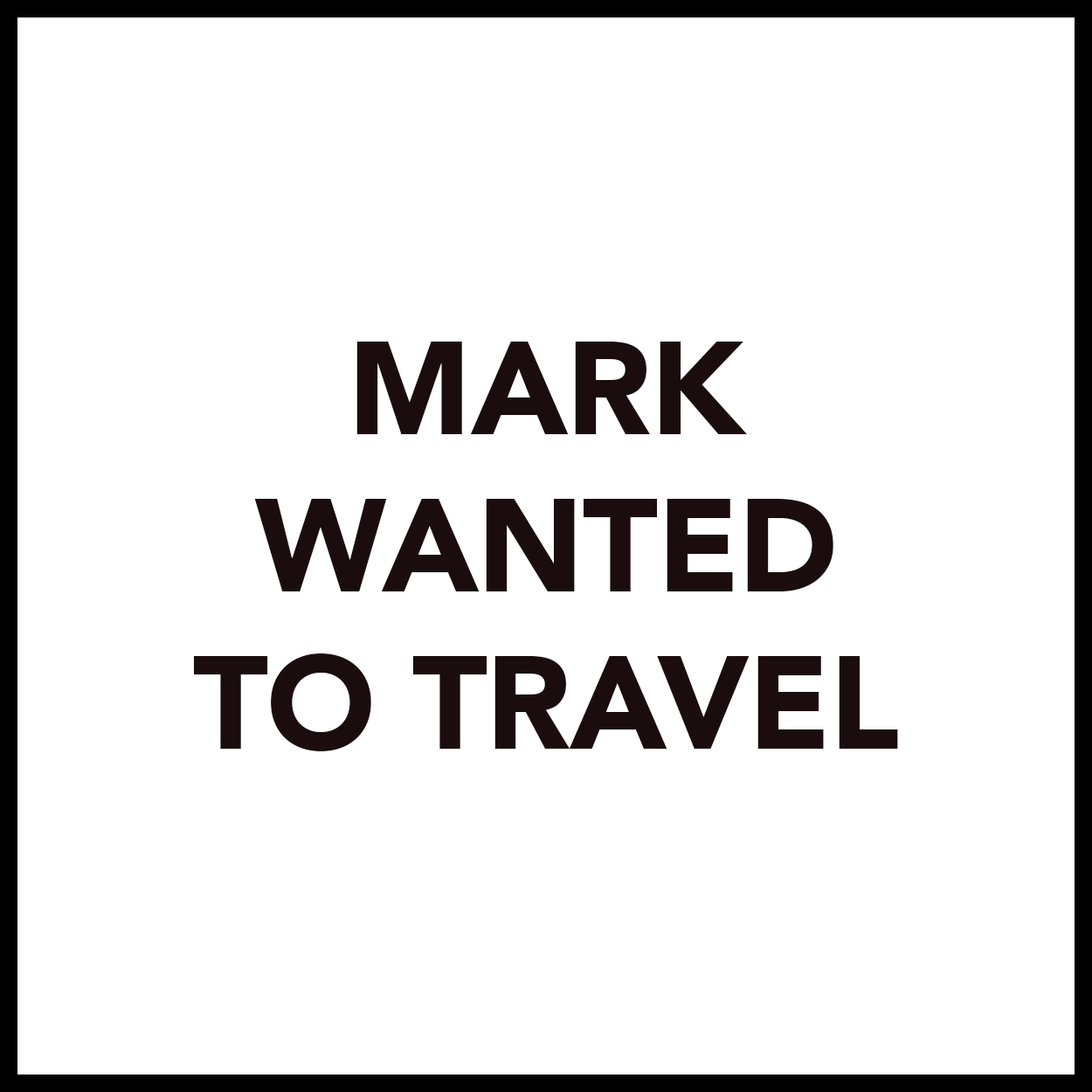
<style>
.page{position:relative;width:1092px;height:1092px;background:#ffffff}
.page>*{position:absolute;margin:0}
.t1{font:131px "Avenir-Black";letter-spacing:-0.01em;color:#1b0d0d}
</style>
<div class="page">
<p class="t1" style="left:194px;top:342px;width:704px;height:409px;text-align:center">MARK<br>WANTED<br>TO TRAVEL</p>
</div>
